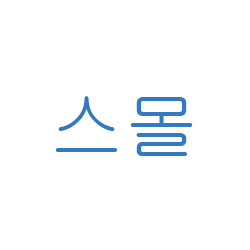
<style>
.page{position:relative;width:250px;height:250px;background:#ffffff}
.page>*{position:absolute;margin:0}
.t1{font:75px "Gulim";color:#337ac1;font-variant:small-caps}
</style>
<div class="page">
<p class="t1" style="left:55px;top:96px;width:138px;height:60px">스몰</p>
</div>
